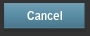
<style>
.page{position:relative;width:90px;height:36px;background:#333333}
.page>*{position:absolute;margin:0}
.t1{font:12px "BellGothicStd-Bold";color:#ffffff;scale:1.05 1}
</style>
<div class="page">
<p class="t1" style="left:27px;top:11px;width:35px;height:9px">Cancel</p>
</div>
